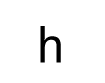
<style>
.page{position:relative;width:105px;height:83px;background:#ffffff}
.page>*{position:absolute;margin:0}
.t1{font:47.9px "DroidSans";color:#000000}
</style>
<div class="page">
<p class="t1" style="left:40px;top:26px;width:21px;height:37px">h</p>
</div>
